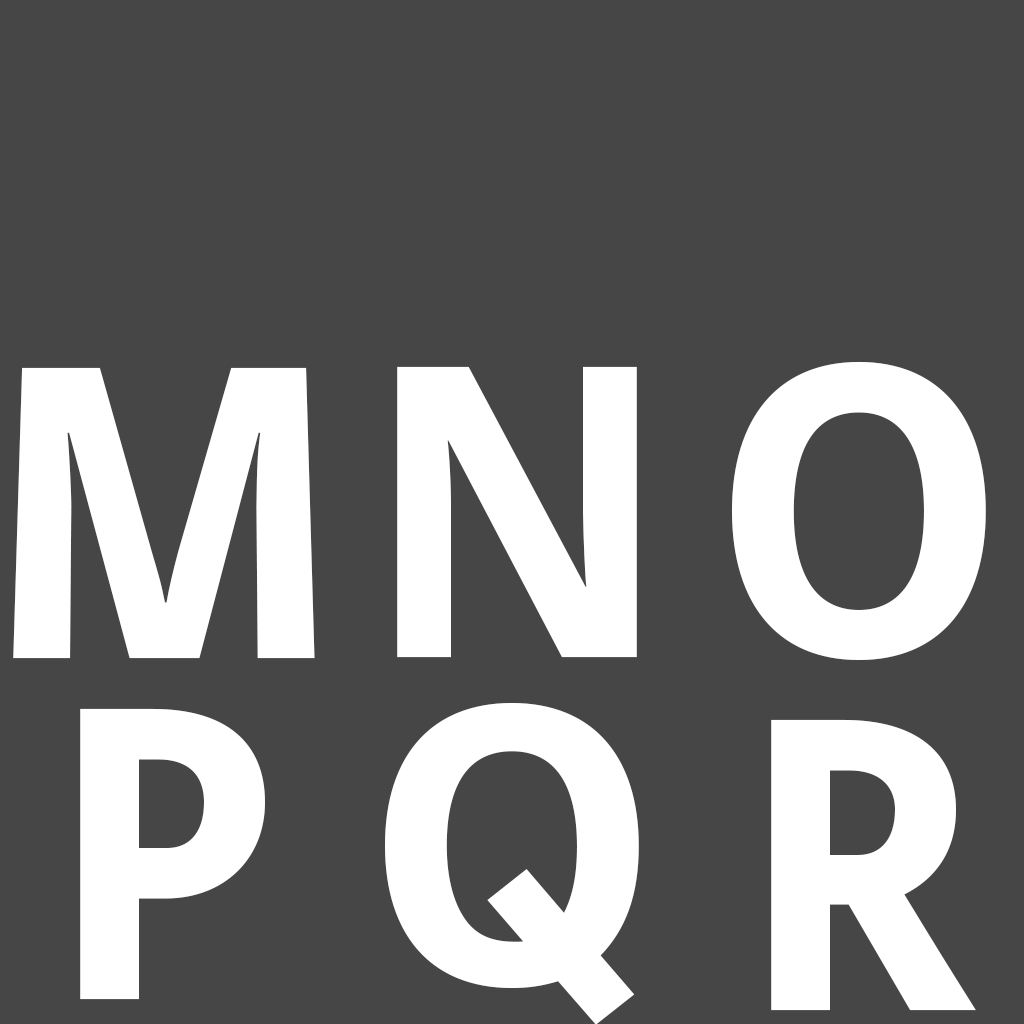
<style>
.page{position:relative;width:1024px;height:1024px;background:#464646}
.page>*{position:absolute;margin:0}
.t1{font:420px "SemikolonPlus-Bold";color:#ffffff}
.t2{font:401.8px "SemikolonPlus-Bold";color:#ffffff;scale:1.05 1}
</style>
<div class="page">
<p class="t1" style="left:397px;top:366px;width:240px;height:292px">N</p>
<p class="t1" style="left:732px;top:361px;width:254px;height:299px">O</p>
<p class="t1" style="left:13px;top:367px;width:302px;height:292px">M</p>
<p class="t1" style="left:80px;top:708px;width:185px;height:292px">P</p>
<p class="t2" style="left:385px;top:703px;width:254px;height:322px">Q</p>
<p class="t1" style="left:771px;top:719px;width:205px;height:292px">R</p>
</div>
